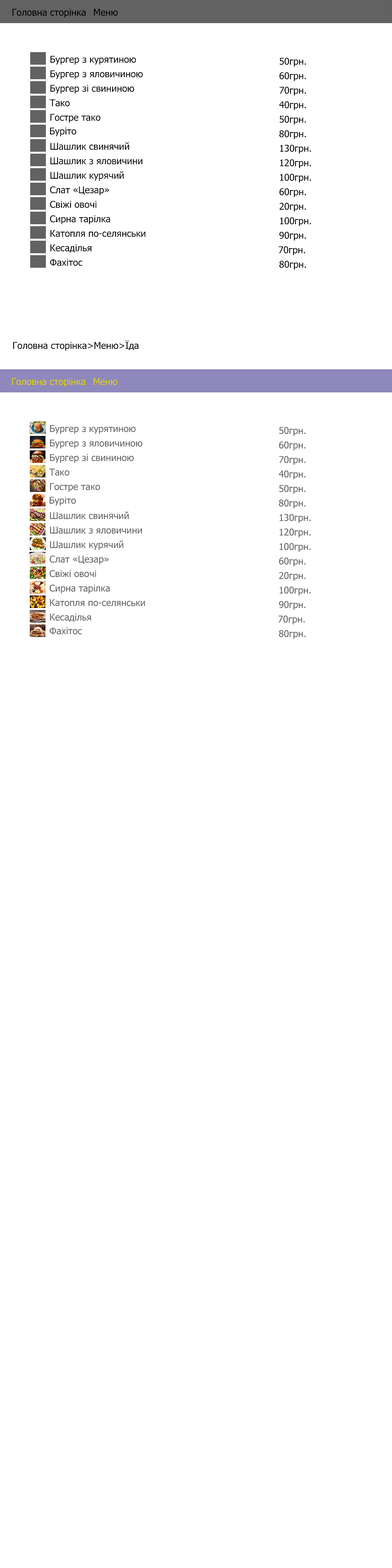
<style>
.page{position:relative;width:392px;height:1568px;background:#ffffff}
.page>*{position:absolute;margin:0}
.t1{font:9.4px "Tahoma";color:#000000}
.t2{font:9.4px "Tahoma";color:#ddcf00}
.t3{font:9.4px "Tahoma";color:#616161}
</style>
<div class="page">
<p class="t1" style="left:12px;top:9px;width:74px;height:9px">Головна сторінка</p>
<p class="t1" style="left:94px;top:9px;width:24px;height:7px">Меню</p>
<p class="t1" style="left:50px;top:56px;width:86px;height:9px">Бургер з курятиною</p>
<p class="t1" style="left:279px;top:58px;width:27px;height:9px">50грн.</p>
<p class="t1" style="left:50px;top:70px;width:93px;height:9px">Бургер з яловичиною</p>
<p class="t1" style="left:279px;top:72px;width:27px;height:9px">60грн.</p>
<p class="t1" style="left:50px;top:85px;width:84px;height:9px">Бургер зі свининою</p>
<p class="t1" style="left:279px;top:87px;width:27px;height:9px">70грн.</p>
<p class="t1" style="left:49px;top:99px;width:21px;height:8px">Тако</p>
<p class="t1" style="left:279px;top:101px;width:27px;height:9px">40грн.</p>
<p class="t1" style="left:50px;top:114px;width:50px;height:9px">Гостре тако</p>
<p class="t1" style="left:279px;top:116px;width:27px;height:9px">50грн.</p>
<p class="t1" style="left:50px;top:127px;width:26px;height:9px">Буріто</p>
<p class="t1" style="left:279px;top:130px;width:27px;height:9px">80грн.</p>
<p class="t1" style="left:50px;top:142px;width:79px;height:8px">Шашлик свинячий</p>
<p class="t1" style="left:280px;top:145px;width:31px;height:9px">130грн.</p>
<p class="t1" style="left:50px;top:157px;width:92px;height:8px">Шашлик з яловичини</p>
<p class="t1" style="left:280px;top:159px;width:31px;height:9px">120грн.</p>
<p class="t1" style="left:50px;top:171px;width:74px;height:10px">Шашлик курячий</p>
<p class="t1" style="left:280px;top:174px;width:31px;height:9px">100грн.</p>
<p class="t1" style="left:50px;top:186px;width:59px;height:9px">Слат «Цезар»</p>
<p class="t1" style="left:279px;top:188px;width:27px;height:9px">60грн.</p>
<p class="t1" style="left:50px;top:201px;width:46px;height:7px">Свіжі овочі</p>
<p class="t1" style="left:279px;top:203px;width:27px;height:9px">20грн.</p>
<p class="t1" style="left:50px;top:215px;width:60px;height:9px">Сирна тарілка</p>
<p class="t1" style="left:280px;top:217px;width:31px;height:9px">100грн.</p>
<p class="t1" style="left:50px;top:230px;width:95px;height:7px">Катопля по-селянськи</p>
<p class="t1" style="left:279px;top:232px;width:27px;height:9px">90грн.</p>
<p class="t1" style="left:50px;top:244px;width:41px;height:9px">Кесаділья</p>
<p class="t1" style="left:279px;top:246px;width:26px;height:9px">70грн.</p>
<p class="t1" style="left:50px;top:259px;width:32px;height:7px">Фахітос</p>
<p class="t1" style="left:279px;top:261px;width:27px;height:9px">80грн.</p>
<p class="t1" style="left:13px;top:340px;width:125px;height:11px">Головна сторінка&gt;Меню&gt;Їда</p>
<p class="t2" style="left:12px;top:378px;width:73px;height:9px">Головна сторінка</p>
<p class="t2" style="left:93px;top:378px;width:25px;height:7px">Меню</p>
<p class="t3" style="left:50px;top:425px;width:86px;height:9px">Бургер з курятиною</p>
<p class="t3" style="left:279px;top:427px;width:26px;height:9px">50грн.</p>
<p class="t3" style="left:50px;top:439px;width:92px;height:9px">Бургер з яловичиною</p>
<p class="t3" style="left:279px;top:441px;width:26px;height:9px">60грн.</p>
<p class="t3" style="left:50px;top:454px;width:84px;height:9px">Бургер зі свининою</p>
<p class="t3" style="left:279px;top:456px;width:26px;height:9px">70грн.</p>
<p class="t3" style="left:49px;top:468px;width:20px;height:8px">Тако</p>
<p class="t3" style="left:279px;top:470px;width:26px;height:9px">40грн.</p>
<p class="t3" style="left:50px;top:483px;width:50px;height:9px">Гостре тако</p>
<p class="t3" style="left:279px;top:485px;width:26px;height:9px">50грн.</p>
<p class="t3" style="left:49px;top:497px;width:27px;height:9px">Буріто</p>
<p class="t3" style="left:279px;top:499px;width:26px;height:9px">80грн.</p>
<p class="t3" style="left:50px;top:511px;width:79px;height:8px">Шашлик свинячий</p>
<p class="t3" style="left:279px;top:514px;width:31px;height:9px">130грн.</p>
<p class="t3" style="left:50px;top:526px;width:92px;height:8px">Шашлик з яловичини</p>
<p class="t3" style="left:279px;top:528px;width:31px;height:9px">120грн.</p>
<p class="t3" style="left:50px;top:540px;width:73px;height:10px">Шашлик курячий</p>
<p class="t3" style="left:279px;top:543px;width:31px;height:9px">100грн.</p>
<p class="t3" style="left:49px;top:555px;width:60px;height:9px">Слат «Цезар»</p>
<p class="t3" style="left:279px;top:557px;width:26px;height:9px">60грн.</p>
<p class="t3" style="left:49px;top:570px;width:47px;height:7px">Свіжі овочі</p>
<p class="t3" style="left:279px;top:572px;width:26px;height:9px">20грн.</p>
<p class="t3" style="left:49px;top:584px;width:61px;height:9px">Сирна тарілка</p>
<p class="t3" style="left:279px;top:586px;width:31px;height:9px">100грн.</p>
<p class="t3" style="left:50px;top:599px;width:95px;height:7px">Катопля по-селянськи</p>
<p class="t3" style="left:279px;top:601px;width:26px;height:9px">90грн.</p>
<p class="t3" style="left:50px;top:613px;width:41px;height:9px">Кесаділья</p>
<p class="t3" style="left:278px;top:615px;width:27px;height:9px">70грн.</p>
<p class="t3" style="left:49px;top:627px;width:33px;height:8px">Фахітос</p>
<p class="t3" style="left:279px;top:630px;width:26px;height:9px">80грн.</p>
</div>
